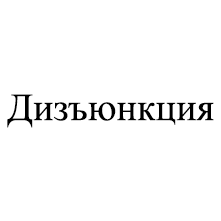
<style>
.page{position:relative;width:221px;height:221px;background:#ffffff}
.page>*{position:absolute;margin:0}
.t1{font:38.3px "TimesNewRomanPSMT";color:#000000}
</style>
<div class="page">
<p class="t1" style="left:7px;top:94px;width:207px;height:34px">Дизъюнкция</p>
</div>
